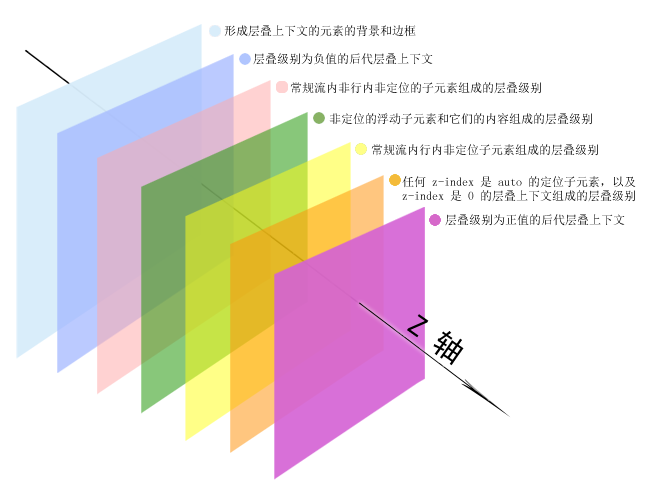
<style>
.page{position:relative;width:649px;height:480px;background:#ffffff}
.page>*{position:absolute;margin:0}
.t1{font:12px "SimSun"}
.t2{font:12px "SimSun";color:#000000}
.t3{font:30px "SimHei";color:#000000}
</style>
<div class="page">
<p class="t1" style="left:224px;top:25px;width:192px;height:12px">形成层叠上下文的元素的背景和边框</p>
<p class="t1" style="left:253px;top:53px;width:180px;height:12px">层叠级别为负值的后代层叠上下文</p>
<p class="t1" style="left:290px;top:82px;width:251px;height:12px">常规流内非行内非定位的子元素组成的层叠级别</p>
<p class="t1" style="left:329px;top:113px;width:263px;height:12px">非定位的浮动子元素和它们的内容组成的层叠级别</p>
<p class="t1" style="left:371px;top:144px;width:227px;height:12px">常规流内行内非定位子元素组成的层叠级别</p>
<p class="t2" style="left:402px;top:176px;width:234px;height:12px">任何 z-index 是 auto 的定位子元素，以及</p>
<p class="t1" style="left:402px;top:190px;width:233px;height:12px">z-index 是 0 的层叠上下文组成的层叠级别</p>
<p class="t1" style="left:445px;top:214px;width:180px;height:12px">层叠级别为正值的后代层叠上下文</p>
<p class="t3" style="left:407px;top:314px;width:57px;height:52px;rotate:35deg">Z 轴</p>
</div>
